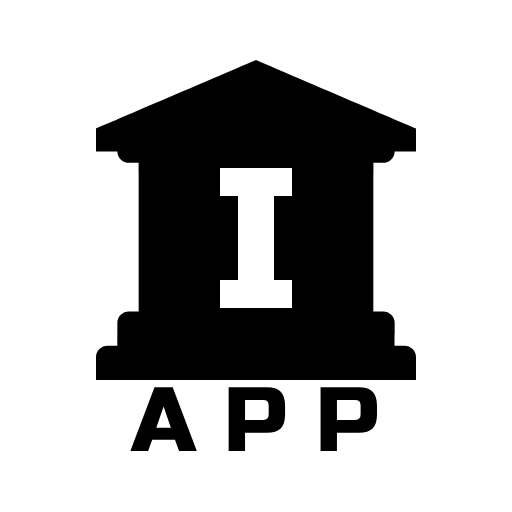
<style>
.page{position:relative;width:512px;height:512px;background:#ffffff}
.page>*{position:absolute;margin:0}
.t1{font:200px "RussoOne-Regular";color:#ffffff}
.t2{font:91px "RussoOne-Regular";color:#000000}
</style>
<div class="page">
<p class="t1" style="left:220px;top:168px;width:72px;height:140px">I</p>
<p class="t2" style="left:130px;top:387px;width:247px;height:64px">A P P</p>
</div>
